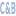
<style>
.page{position:relative;width:16px;height:16px;background:#ffffff}
.page>*{position:absolute;margin:0}
.t1{font:16px "Lato-Bold";letter-spacing:0.1em;color:#9db0d1;text-transform:uppercase;scale:0.44 1}
</style>
<div class="page">
<p class="t1" style="left:0px;top:2px;width:16px;height:12px">C&amp;B</p>
</div>
